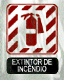
<style>
.page{position:relative;width:64px;height:80px}
.page>*{position:absolute;margin:0}
.t1{font:7.6px/7px "ArialMT";scale:0.78 1}
</style>
<div class="page">
<p class="t1" style="left:12px;top:58px;width:40px;height:14px;text-align:center">EXTINTOR DE<br>INCÊNDIO</p>
</div>
